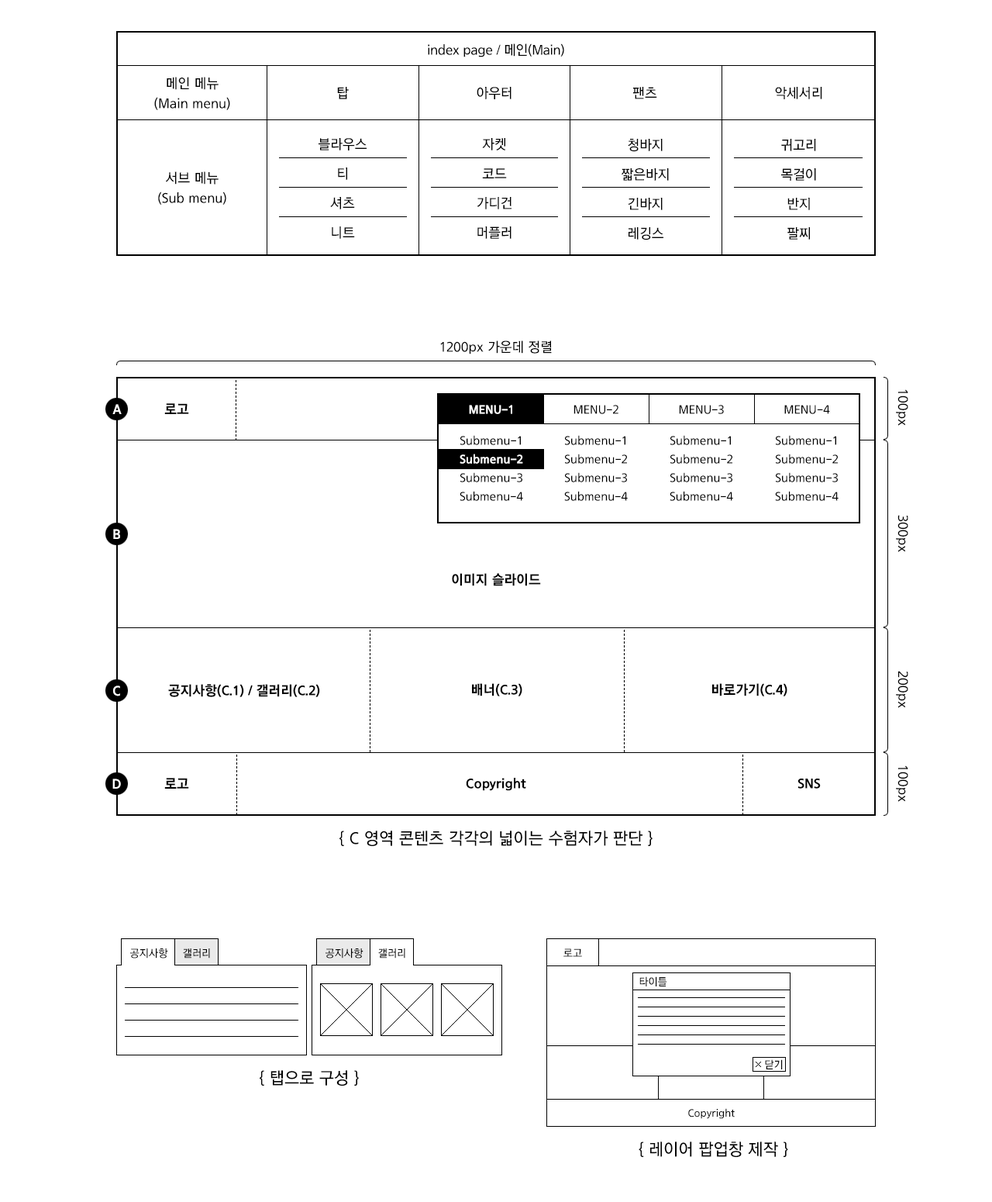
<style>
.page{position:relative;width:992px;height:1202px;background:#ffffff}
.page>*{position:absolute;margin:0}
.t1{font:14px "THELuxGoM";letter-spacing:-0.025em;color:#000000;scale:0.95 1}
.t2{font:14px/20.2px "THELuxGoM";color:#000000;scale:0.95 1}
.t3{font:14px "THELuxGoM";color:#000000;scale:0.95 1}
.t4{font:14px/29.5px "THELuxGoM";color:#000000;scale:0.95 1}
.t5{font:13.9px "THELuxGoM";color:#000000;scale:0.96 1}
.t6{font:14px "THELuxGoEB";color:#ffffff;scale:0.95 1}
.t7{font:14px "THELuxGoEB";color:#000000;scale:0.95 1}
.t8{font:12.4px/18.6px "THELuxGoM";color:#000000;scale:0.95 1}
.t9{font:12.4px/31px "THELuxGoM";color:#000000;scale:0.95 1}
.t10{font:17.1px "THELuxGoM";color:#000000;scale:0.95 1}
.t11{font:10.9px "THELuxGoM";color:#000000;scale:0.95 1}
</style>
<div class="page">
<p class="t1" style="left:428px;top:43px;width:136px;height:14px">index page / 메인(Main)</p>
<p class="t2" style="left:154px;top:77px;width:76px;height:33px;text-align:center">메인 메뉴<br>(Main menu)</p>
<p class="t3" style="left:337px;top:87px;width:12px;height:12px">탑</p>
<p class="t3" style="left:477px;top:87px;width:35px;height:12px">아우터</p>
<p class="t3" style="left:633px;top:87px;width:24px;height:12px">팬츠</p>
<p class="t3" style="left:775px;top:87px;width:48px;height:12px">악세서리</p>
<p class="t4" style="left:319px;top:138px;width:48px;height:101px;text-align:center">블라우스<br>티<br>셔츠<br>니트</p>
<p class="t4" style="left:477px;top:138px;width:35px;height:101px;text-align:center">자켓<br>코드<br>가디건<br>머플러</p>
<p class="t4" style="left:622px;top:139px;width:47px;height:101px;text-align:center">청바지<br>짧은바지<br>긴바지<br>레깅스</p>
<p class="t4" style="left:781px;top:139px;width:35px;height:101px;text-align:center">귀고리<br>목걸이<br>반지<br>팔찌</p>
<p class="t2" style="left:158px;top:171px;width:68px;height:34px;text-align:center">서브 메뉴<br>(Sub menu)</p>
<p class="t3" style="left:440px;top:340px;width:112px;height:14px">1200px 가운데 정렬</p>
<p class="t5" style="left:896px;top:389px;width:13px;height:37px;rotate:90deg">100px</p>
<p class="t6" style="left:112px;top:404px;width:10px;height:10px">A</p>
<p class="t7" style="left:164px;top:403px;width:25px;height:11px">로고</p>
<p class="t8" style="left:564px;top:405px;width:64px;height:96px;text-align:center"><span class="t9">MENU-2<br>Submenu-1<br></span>Submenu-2<br>Submenu-3<br>Submenu-4</p>
<p class="t8" style="left:670px;top:405px;width:63px;height:96px;text-align:center"><span class="t9">MENU-3<br>Submenu-1<br></span>Submenu-2<br>Submenu-3<br>Submenu-4</p>
<p class="t8" style="left:775px;top:405px;width:64px;height:96px;text-align:center"><span class="t9">MENU-4<br>Submenu-1<br></span>Submenu-2<br>Submenu-3<br>Submenu-4</p>
<p class="t5" style="left:896px;top:515px;width:13px;height:37px;rotate:90deg">300px</p>
<p class="t6" style="left:113px;top:529px;width:7px;height:10px">B</p>
<p class="t7" style="left:452px;top:573px;width:89px;height:13px">이미지 슬라이드</p>
<p class="t5" style="left:896px;top:671px;width:13px;height:37px;rotate:90deg">200px</p>
<p class="t6" style="left:113px;top:685px;width:7px;height:11px">C</p>
<p class="t7" style="left:168px;top:684px;width:152px;height:13px">공지사항(C.1) / 갤러리(C.2)</p>
<p class="t7" style="left:472px;top:683px;width:51px;height:13px">배너(C.3)</p>
<p class="t7" style="left:712px;top:683px;width:76px;height:13px">바로가기(C.4)</p>
<p class="t5" style="left:896px;top:765px;width:13px;height:37px;rotate:90deg">100px</p>
<p class="t6" style="left:112px;top:778px;width:9px;height:10px">D</p>
<p class="t7" style="left:164px;top:778px;width:25px;height:10px">로고</p>
<p class="t7" style="left:466px;top:778px;width:60px;height:13px">Copyright</p>
<p class="t7" style="left:798px;top:778px;width:23px;height:10px">SNS</p>
<p class="t10" style="left:340px;top:830px;width:313px;height:16px">{ C 영역 콘텐츠 각각의 넓이는 수험자가 판단 }</p>
<p class="t11" style="left:130px;top:948px;width:38px;height:10px">공지사항</p>
<p class="t11" style="left:183px;top:948px;width:27px;height:10px">갤러리</p>
<p class="t11" style="left:326px;top:948px;width:38px;height:10px">공지사항</p>
<p class="t11" style="left:378px;top:948px;width:27px;height:10px">갤러리</p>
<p class="t11" style="left:564px;top:948px;width:18px;height:9px">로고</p>
<p class="t11" style="left:640px;top:976px;width:27px;height:10px">타이틀</p>
<p class="t11" style="left:765px;top:1059px;width:18px;height:10px">닫기</p>
<p class="t10" style="left:260px;top:1070px;width:99px;height:15px">{ 탭으로 구성 }</p>
<p class="t11" style="left:688px;top:1108px;width:47px;height:11px">Copyright</p>
<p class="t10" style="left:639px;top:1141px;width:149px;height:16px">{ 레이어 팝업창 제작 }</p>
</div>
